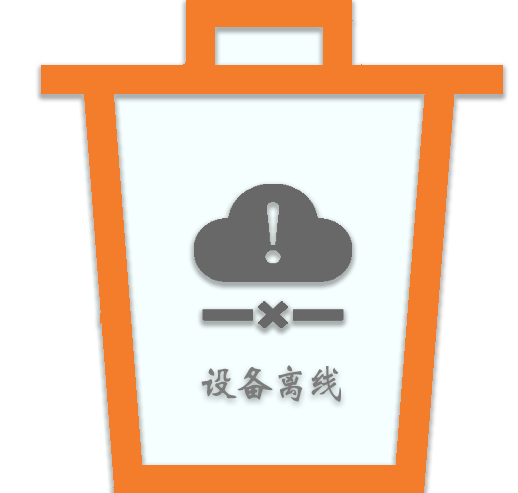
<style>
.page{position:relative;width:518px;height:493px;background:#ffffff}
.page>*{position:absolute;margin:0}
.t1{font:36px "HGWT_CNKI";color:#7c7c7c}
</style>
<div class="page">
<p class="t1" style="left:201px;top:365px;width:140px;height:37px">设备离线</p>
</div>
